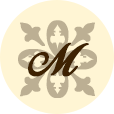
<style>
.page{position:relative;width:114px;height:114px;background:#fff5d4}
.page>*{position:absolute;margin:0}
.t1{font:80px "Floralia";color:#bcaf93;font-weight:bold}
.t2{font:40px "BirdsofParadise";color:#3e2202;font-weight:bold}
</style>
<div class="page">
<p class="t1" style="left:18px;top:20px;width:79px;height:78px">d</p>
<p class="t2" style="left:28px;top:42px;width:61px;height:35px">M</p>
</div>
